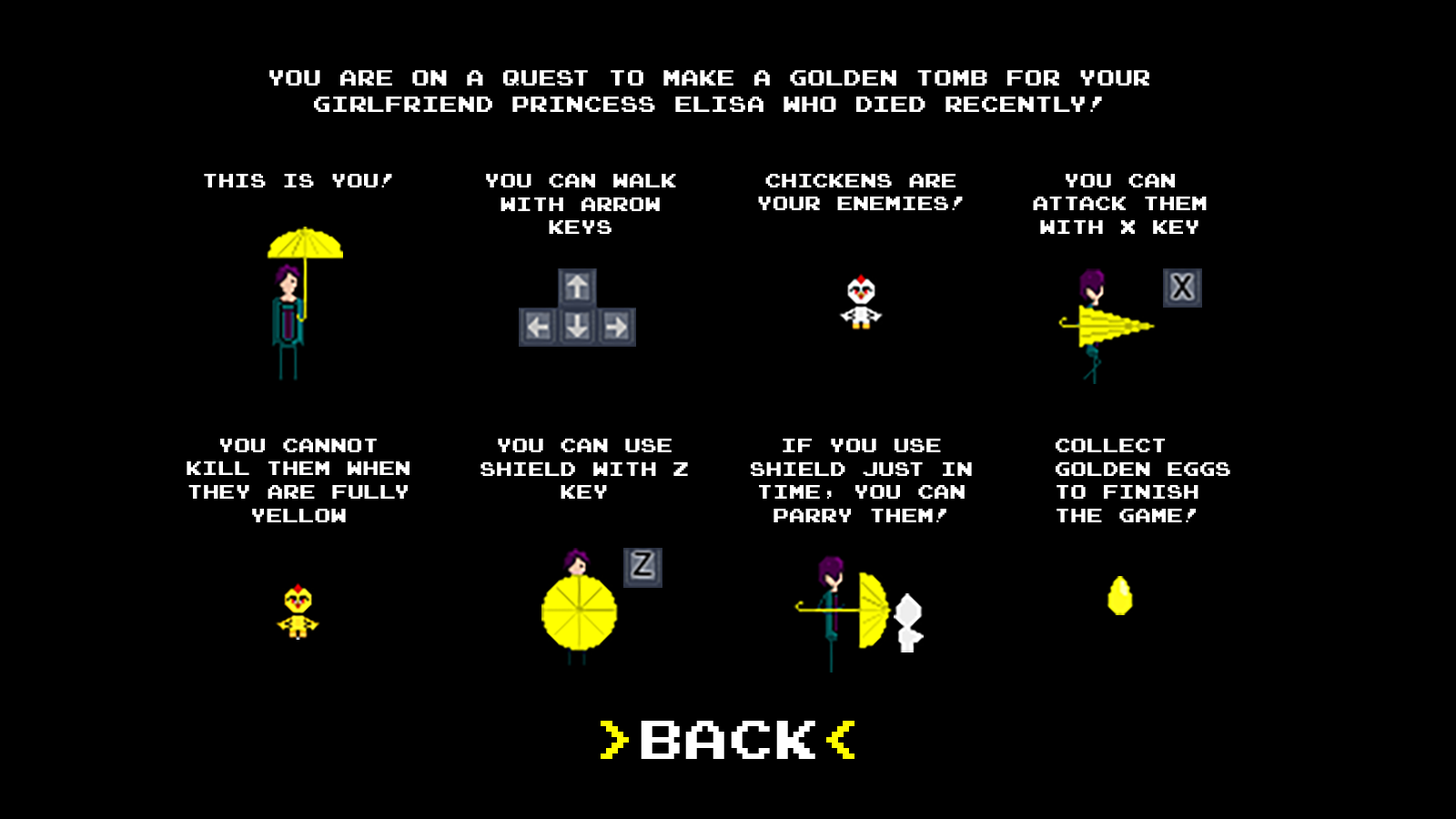
<style>
.page{position:relative;width:1456px;height:819px;background:#000000}
.page>*{position:absolute;margin:0}
.t1{font:21.8px "JoystixMonospace-Regular";color:#ffffff}
.t2{font:19.4px "JoystixMonospace-Regular";color:#ffffff}
</style>
<div class="page">
<p class="t1" style="left:269px;top:70px;width:880px;height:42px;text-align:center">You are on a quest to make a golden tomb for your girlfriend Princess Elisa who died recently!</p>
<p class="t2" style="left:204px;top:174px;width:188px;height:13px">this is you!</p>
<p class="t2" style="left:486px;top:174px;width:190px;height:60px;text-align:center">you can walk wıth arrow keys</p>
<p class="t2" style="left:758px;top:174px;width:205px;height:36px;text-align:center">CHICKENS ARE YOUR ENEMIES!</p>
<p class="t2" style="left:1033px;top:174px;width:174px;height:60px;text-align:center">you can attack them wıth x key</p>
<p class="t2" style="left:187px;top:439px;width:222px;height:83px;text-align:center">you cannot kill them when they are fully yellow</p>
<p class="t2" style="left:480px;top:439px;width:208px;height:60px;text-align:center">you can use shıeld wıth z key</p>
<p class="t2" style="left:751px;top:439px;width:221px;height:83px;text-align:center">IF YOU USE SHIELD JUST IN TIME, YOU CAN PARRY THEM!</p>
<p class="t2" style="left:1056px;top:439px;width:174px;height:83px">collect golden eggs to finish the game!</p>
</div>
